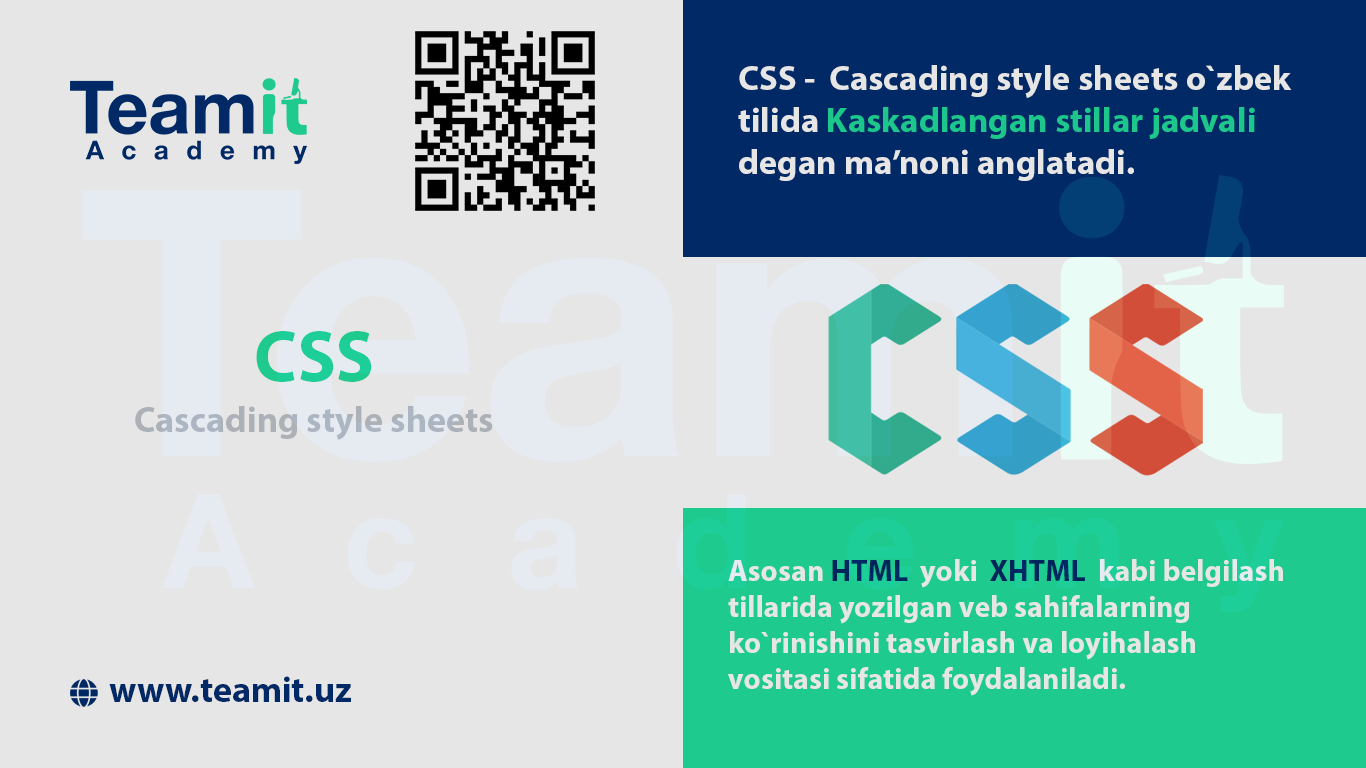
<style>
.page{position:relative;width:1366px;height:768px;background:#e6e6e6}
.page>*{position:absolute;margin:0}
.t1{font:35px "MyriadPro-Bold"}
.t2{font:72px "MyriadPro-Bold";color:#21e09d}
.t3{font:36px "MyriadPro-Bold";color:#bfc4cb}
.t4{font:30px "MyriadPro-Bold";color:#e6e6e6}
.t5{font:36px "MyriadPro-Bold";color:#002d70}
</style>
<div class="page">
<p class="t1" style="left:738px;top:65px;width:554px;height:116px">CSS -  Cascading style sheets o`zbek<br>tilida Kaskadlangan stillar jadvali<br>degan ma’noni anglatadi.</p>
<p class="t2" style="left:256px;top:331px;width:116px;height:51px">CSS</p>
<p class="t3" style="left:135px;top:406px;width:358px;height:34px">Cascading style sheets</p>
<p class="t4" style="left:728px;top:559px;width:555px;height:137px">Asosan HTML  yoki  XHTML  kabi belgilash<br>tillarida yozilgan veb sahifalarning<br>ko`rinishini tasvirlash va loyihalash<br>vositasi sifatida foydalaniladi.</p>
<p class="t5" style="left:109px;top:676px;width:242px;height:26px">www.teamit.uz</p>
</div>
